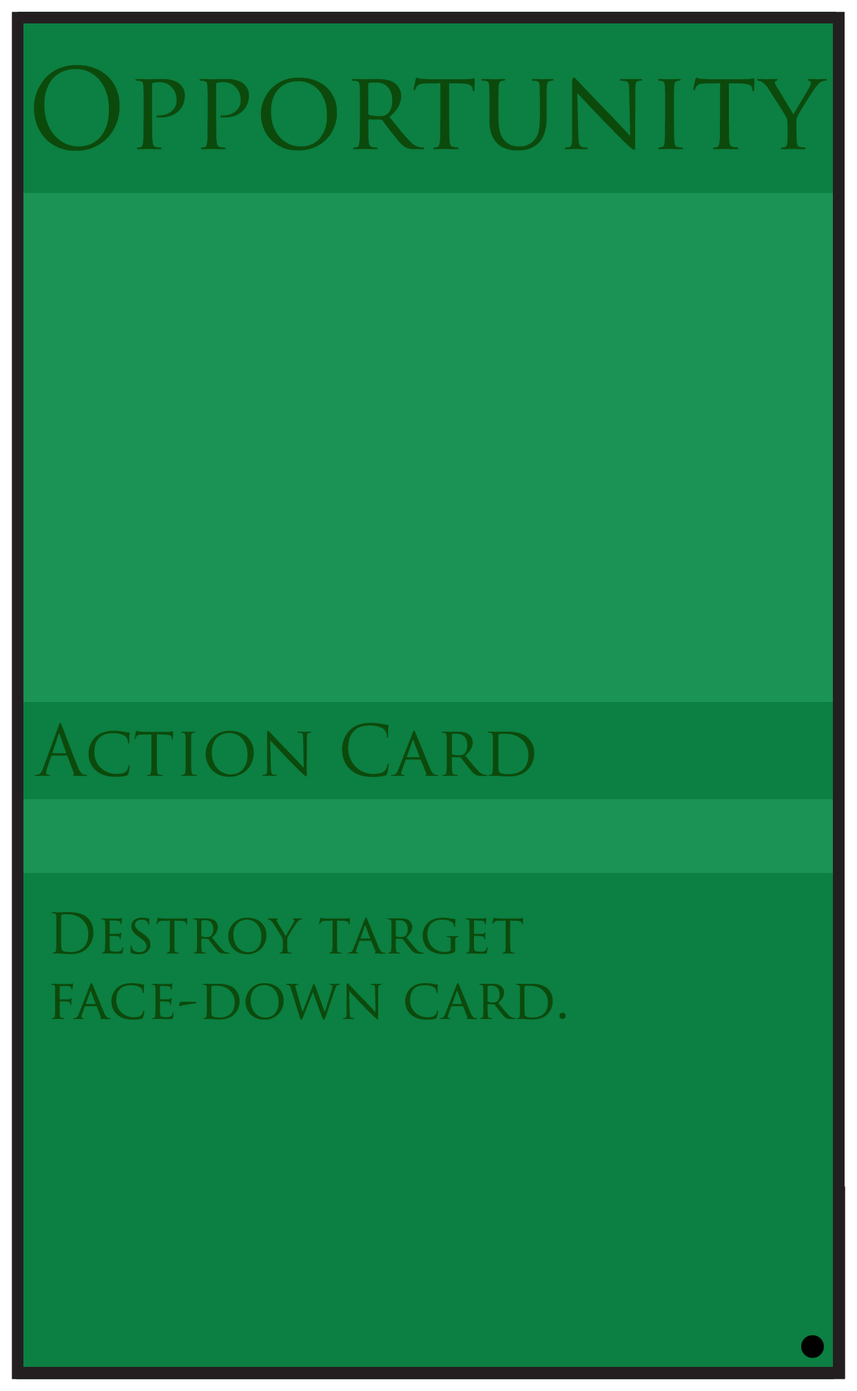
<style>
.page{position:relative;width:857px;height:1391px;background:#0c7f42}
.page>*{position:absolute;margin:0}
.t1{font:109.1px "TrajanPro-Regular";color:#0c4a0c}
.t2{font:68.9px "TrajanPro-Regular";color:#0c4a0c}
.t3{font:54.5px "TrajanPro-Regular";color:#0c4a0c}
</style>
<div class="page">
<p class="t1" style="left:34px;top:65px;width:793px;height:86px">Opportunity</p>
<p class="t2" style="left:34px;top:723px;width:501px;height:54px">Action Card</p>
<p class="t3" style="left:51px;top:912px;width:515px;height:108px">Destroy target <br>face-down card.</p>
</div>
